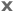
<style>
.page{position:relative;width:14px;height:12px;background:#ffffff}
.page>*{position:absolute;margin:0}
.t1{font:18px "Verdana-Bold";color:#666666}
</style>
<div class="page">
<p class="t1" style="left:1px;top:1px;width:12px;height:10px">x</p>
</div>
